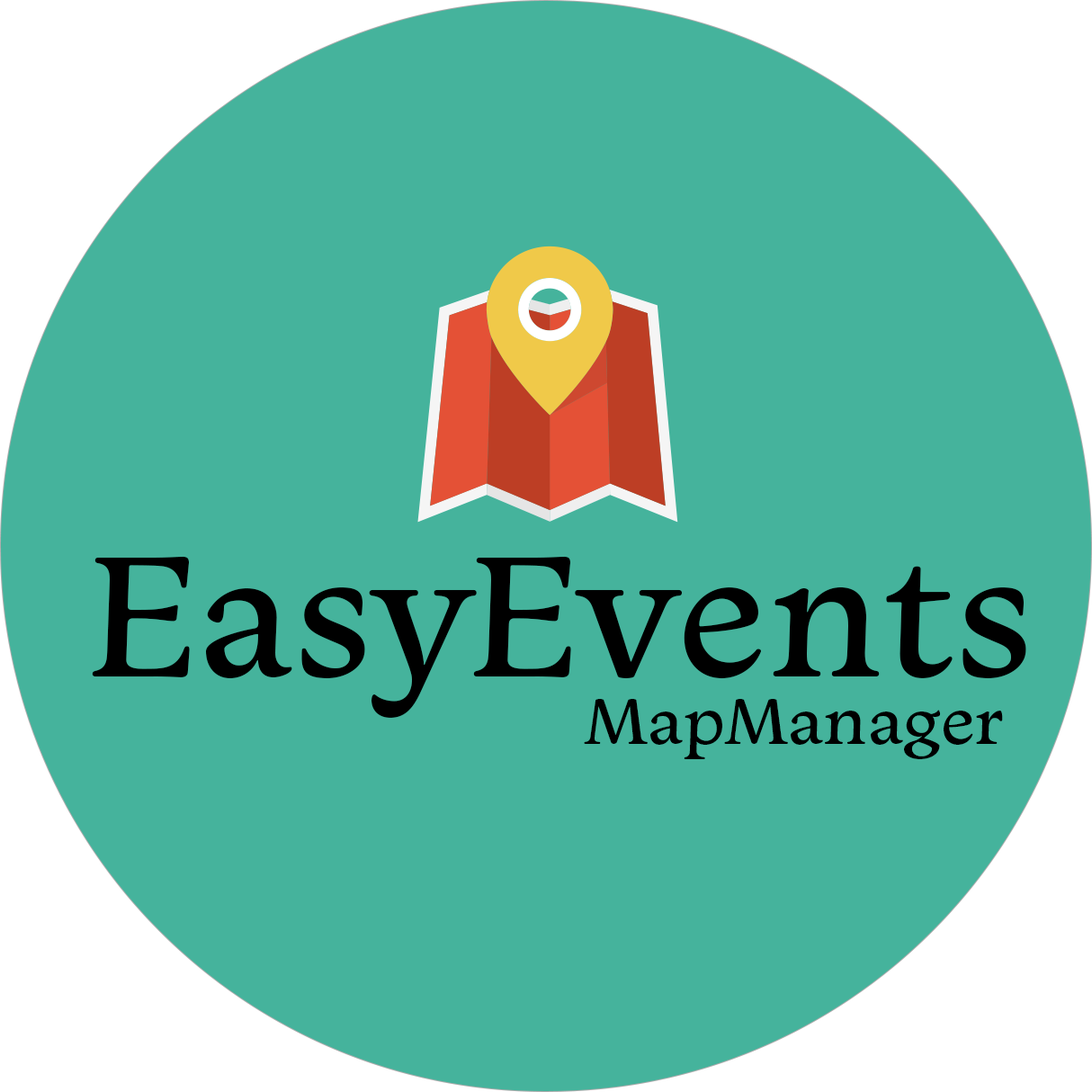
<style>
.page{position:relative;width:1092px;height:1092px;background:#45b39c}
.page>*{position:absolute;margin:0}
.t1{font:179.9px "Monarcha";color:#000000}
.t2{font:67.5px "Monarcha";color:#000000}
</style>
<div class="page">
<p class="t1" style="left:92px;top:556px;width:934px;height:162px">EasyEvents</p>
<p class="t2" style="left:584px;top:699px;width:419px;height:60px">MapManager</p>
</div>
